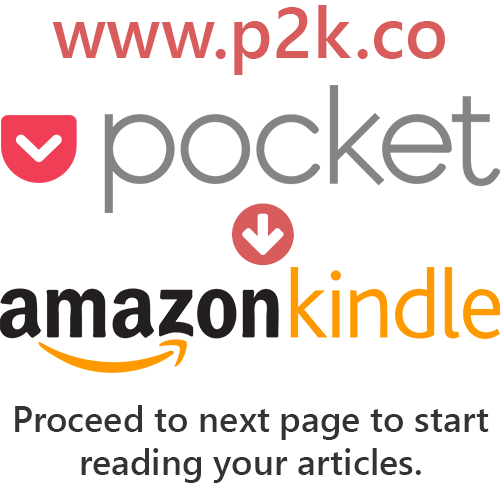
<style>
.page{position:relative;width:500px;height:500px;background:#ffffff}
.page>*{position:absolute;margin:0}
.t1{font:72px "SegoeUI-Semibold";color:#d95c5c}
.t2{font:36px "SegoeUI-Semibold";color:#333333}
</style>
<div class="page">
<p class="t1" style="left:52px;top:5px;width:393px;height:70px">www.p2k.co</p>
<p class="t2" style="left:15px;top:405px;width:474px;height:78px;text-align:center">Proceed to next page to start reading your articles.</p>
</div>
